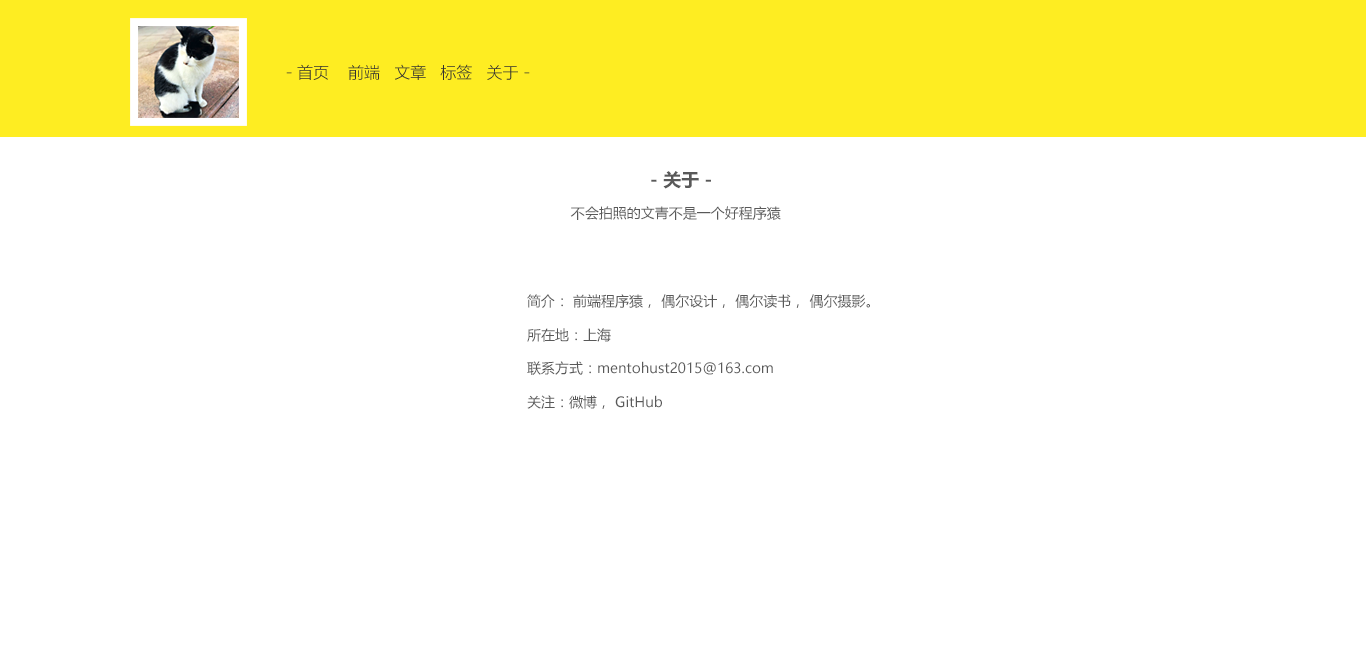
<style>
.page{position:relative;width:1366px;height:650px;background:#ffffff}
.page>*{position:absolute;margin:0}
.t1{font:18px "MicrosoftYaHei-Bold";color:#595959}
.t2{font:14px "MicrosoftYaHei";color:#595959}
</style>
<div class="page">
<p class="t1" style="left:651px;top:171px;width:60px;height:18px">- 关于 -</p>
<p class="t2" style="left:570px;top:206px;width:211px;height:14px">不会拍照的文青不是一个好程序猿</p>
<p class="t2" style="left:527px;top:294px;width:343px;height:115px">简介： 前端程序猿， 偶尔设计， 偶尔读书， 偶尔摄影。<br><br>所在地：上海<br><br>联系方式：mentohust2015@163.com<br><br>关注：微博， GitHub</p>
</div>
